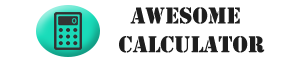
<style>
.page{position:relative;width:300px;height:63px;background:#ffffff}
.page>*{position:absolute;margin:0}
.t1{font:24px "Stencil";color:#1e1e1e}
</style>
<div class="page">
<p class="t1" style="left:119px;top:7px;width:146px;height:46px;text-align:center">Awesome  <br>Calculator</p>
</div>
